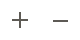
<style>
.page{position:relative;width:80px;height:40px;background:#ffffff}
.page>*{position:absolute;margin:0}
.t1{font:30px "Kameron";color:#5d5a55}
</style>
<div class="page">
<p class="t1" style="left:12px;top:12px;width:16px;height:16px">+</p>
</div>
